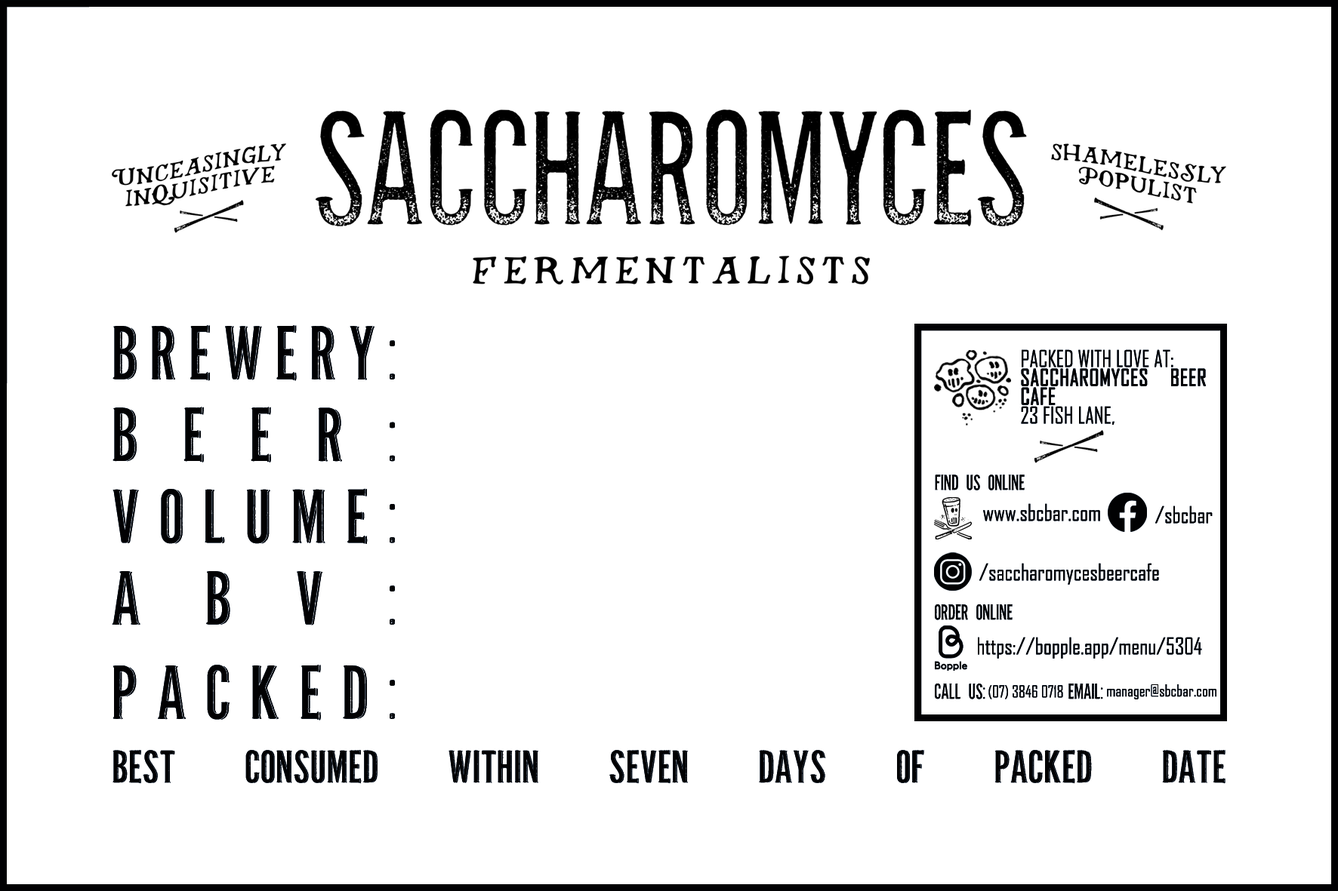
<style>
.page{position:relative;width:1338px;height:891px;background:#ffffff}
.page>*{position:absolute;margin:0}
.t1{font:78.6px/81.8px "ParlourPro-Regular";color:#010102}
.t2{font:22px/18.9px "AgencyFB-Reg";color:#010102;text-transform:uppercase}
.t3{font:22px/18.9px "AgencyFB-Reg";color:#010102;text-transform:uppercase;font-weight:bold}
.t4{font:22px "ParlourPro-Regular";color:#010102;text-transform:uppercase}
.t5{font:22px "AgencyFB-Reg";color:#010102}
.t6{font:22px "AgencyFB-Reg";color:#010102;text-transform:uppercase}
.t7{font:15.7px "AgencyFB-Reg";color:#010102}
.t8{font:47.2px "ParlourPro-Regular";color:#010102}
</style>
<div class="page">
<p class="t1" style="left:112px;top:325px;width:283px;height:396px;text-align:justify">brewery:<br>beer:<br>volume:<br>abv:<br>packed:</p>
<p class="t2" style="left:1021px;top:349px;width:184px;height:76px;text-align:justify">packed WITH LOVE AT:<br><span class="t3">SACCHAROMYCES BEER CAFE<br></span>23 FISH LANE,<br>SOUTH BRISBANE</p>
<p class="t4" style="left:935px;top:475px;width:89px;height:16px">find us online</p>
<p class="t5" style="left:983px;top:503px;width:117px;height:19px">www<span class="t6">.</span>sbcbar.com</p>
<p class="t5" style="left:1155px;top:506px;width:57px;height:18px">/sbcbar</p>
<p class="t5" style="left:979px;top:563px;width:180px;height:22px">/saccharomycesbeercafe</p>
<p class="t4" style="left:935px;top:604px;width:77px;height:16px">order online</p>
<p class="t5" style="left:978px;top:637px;width:224px;height:22px">https://bopple.app/menu/5304</p>
<p class="t4" style="left:935px;top:684px;width:50px;height:16px">call us:</p>
<p class="t7" style="left:988px;top:685px;width:75px;height:15px">(07) 3846 0718</p>
<p class="t4" style="left:1068px;top:683px;width:35px;height:17px">email:</p>
<p class="t7" style="left:1107px;top:685px;width:109px;height:15px">manager@sbcbar.com</p>
<p class="t8" style="left:112px;top:750px;width:1113px;height:34px">best consumed within seven days of packed date</p>
</div>
